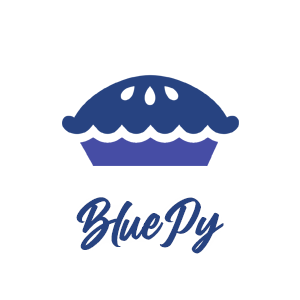
<style>
.page{position:relative;width:300px;height:300px;background:#ffffff}
.page>*{position:absolute;margin:0}
.t1{font:60px "BillionDreams";color:#274381}
</style>
<div class="page">
<p class="t1" style="left:76px;top:197px;width:148px;height:57px">BluePy</p>
</div>
